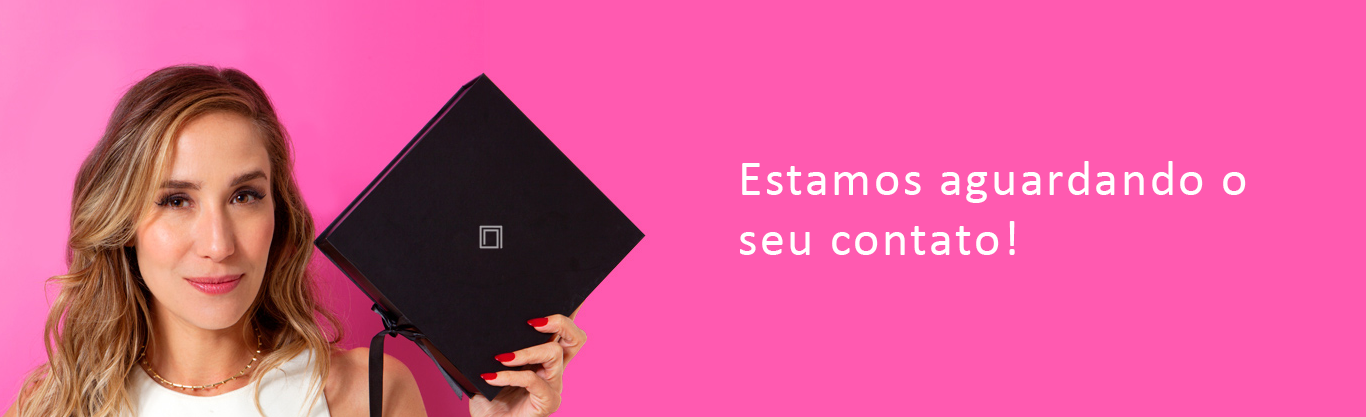
<style>
.page{position:relative;width:1366px;height:417px;background:#ff5ab0}
.page>*{position:absolute;margin:0}
.t1{font:50px "Calibri";letter-spacing:0.05em;color:#ffffff}
</style>
<div class="page">
<p class="t1" style="left:740px;top:161px;width:506px;height:94px">Estamos aguardando o <br>seu contato!</p>
</div>
